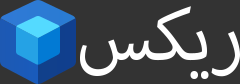
<style>
.page{position:relative;width:240px;height:84px;background:#333333}
.page>*{position:absolute;margin:0}
.t1{font:104.3px "MyriadArabic-Regular";color:#ffffff}
</style>
<div class="page">
<p class="t1" style="left:80px;top:6px;width:160px;height:73px">ریکس</p>
</div>
